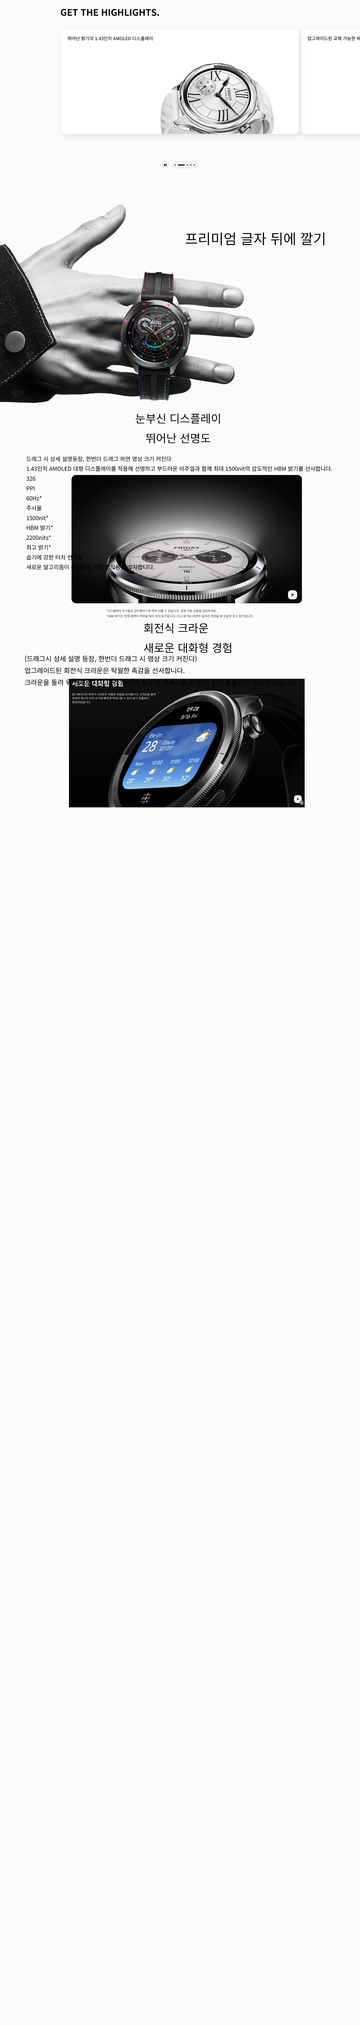
<style>
.page{position:relative;width:360px;height:2025px;background:#fbfbfb}
.page>*{position:absolute;margin:0}
.t1{font:9px "NotoSansKR-Bold";color:#000000}
.t2{font:4.5px "NotoSansKR-Regular";color:#000000}
.t3{font:14.1px "NotoSansKR-Regular";color:#000000}
.t4{font:11.2px "NotoSansKR-Regular";color:#000000}
.t5{font:3px "NotoSansKR-Regular";color:#6e6e6e}
.t6{font:6.8px "NotoSansKR-Regular";color:#000000}
</style>
<div class="page">
<p class="t1" style="left:61px;top:9px;width:98px;height:7px">GET THE HIGHLIGHTS.</p>
<p class="t2" style="left:68px;top:36px;width:85px;height:5px">뛰어난 밝기의 1.43인치 AMOLED 디스플레이</p>
<p class="t3" style="left:185px;top:232px;width:139px;height:13px">프리미엄 글자 뒤에 깔기</p>
<p class="t4" style="left:136px;top:413px;width:84px;height:30px;text-align:center">눈부신 디스플레이<br>뛰어난 선명도</p>
<p class="t5" style="left:106px;top:609px;width:147px;height:9px">*디스플레이 주사율은 인터페이스에 따라 다를 수 있습니다. 실제 사용 상황을 참조하세요.<br>*HBM 밝기는 전체 화면이 켜졌을 때의 최대 밝기입니다. 최고 밝기는 화면의 일부만 켜졌을 때 도달한 최고 밝기입니다.</p>
<p class="t4" style="left:144px;top:623px;width:87px;height:30px">회전식 크라운<br>새로운 대화형 경험</p>
<p class="t6" style="left:25px;top:655px;width:271px;height:31px">(드래그시 상세 설명 등장, 한번더 드래그 시 영상 크기 커진다)<br>업그레이드된 회전식 크라운은 탁월한 촉감을 선사합니다. <br>크라운을 돌려 위젯과 메시지 미리 보기에 빠르게 액세스할 수 있어 읽기 효율성이 향상되었습니다</p>
</div>
